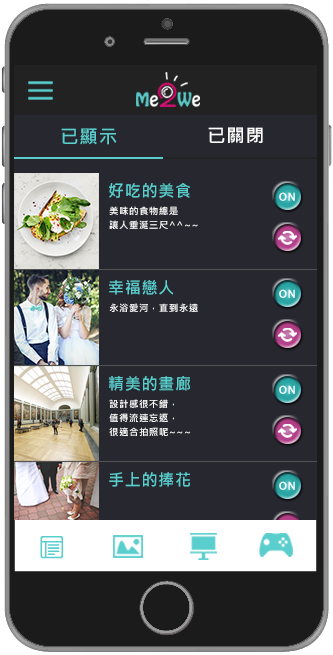
<style>
.page{position:relative;width:333px;height:655px;background:#272730}
.page>*{position:absolute;margin:0}
.t1{font:18.2px "MicrosoftJhengHeiUIBold";letter-spacing:0.04em;color:#5acdcd}
.t2{font:18.2px "MicrosoftJhengHeiUIBold";letter-spacing:0.04em;color:#ffffff}
.t3{font:16.5px "MicrosoftJhengHeiUIBold";letter-spacing:0.04em;color:#5acdcd}
.t4{font:10.1px "MicrosoftJhengHeiUIBold";letter-spacing:0.04em;color:#ffffff;font-weight:bold}
.t5{font:9.6px/14px "MicrosoftJhengHeiUIBold";letter-spacing:0.04em;color:#ffffff}
.t6{font:9.6px "MicrosoftJhengHeiUIBold";letter-spacing:0.04em;color:#ffffff}
</style>
<div class="page">
<p class="t1" style="left:61px;top:128px;width:56px;height:17px">已顯示</p>
<p class="t2" style="left:208px;top:127px;width:55px;height:16px">已關閉</p>
<p class="t3" style="left:109px;top:183px;width:82px;height:15px">好吃的美食</p>
<p class="t4" style="left:279px;top:192px;width:16px;height:9px">ON</p>
<p class="t5" style="left:109px;top:206px;width:89px;height:23px">美味的食物總是<br>讓人垂涎三尺^^~~</p>
<p class="t3" style="left:109px;top:280px;width:65px;height:15px">幸福戀人</p>
<p class="t4" style="left:279px;top:289px;width:16px;height:9px">ON</p>
<p class="t6" style="left:109px;top:303px;width:89px;height:9px">永浴愛河，直到永遠</p>
<p class="t3" style="left:109px;top:376px;width:81px;height:15px">精美的畫廊</p>
<p class="t4" style="left:279px;top:385px;width:16px;height:9px">ON</p>
<p class="t5" style="left:109px;top:399px;width:81px;height:37px">設計感很不錯，<br>值得流連忘返，<br>很適合拍照呢~~~</p>
<p class="t3" style="left:109px;top:472px;width:81px;height:15px">手上的捧花</p>
<p class="t4" style="left:279px;top:481px;width:16px;height:9px">ON</p>
</div>
